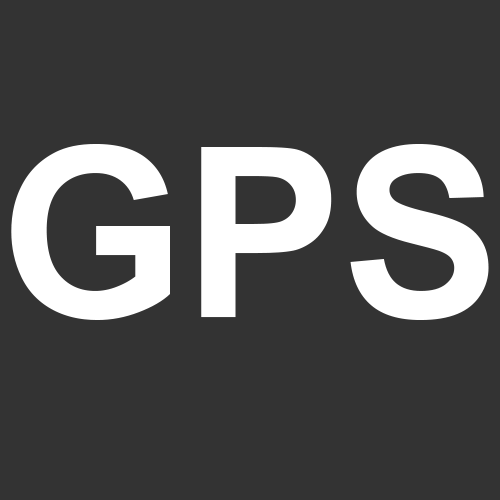
<style>
.page{position:relative;width:500px;height:500px;background:#333333}
.page>*{position:absolute;margin:0}
.t1{font:236.8px "Arial-BoldMT";color:#ffffff}
</style>
<div class="page">
<p class="t1" style="left:11px;top:144px;width:478px;height:176px">GPS</p>
</div>
